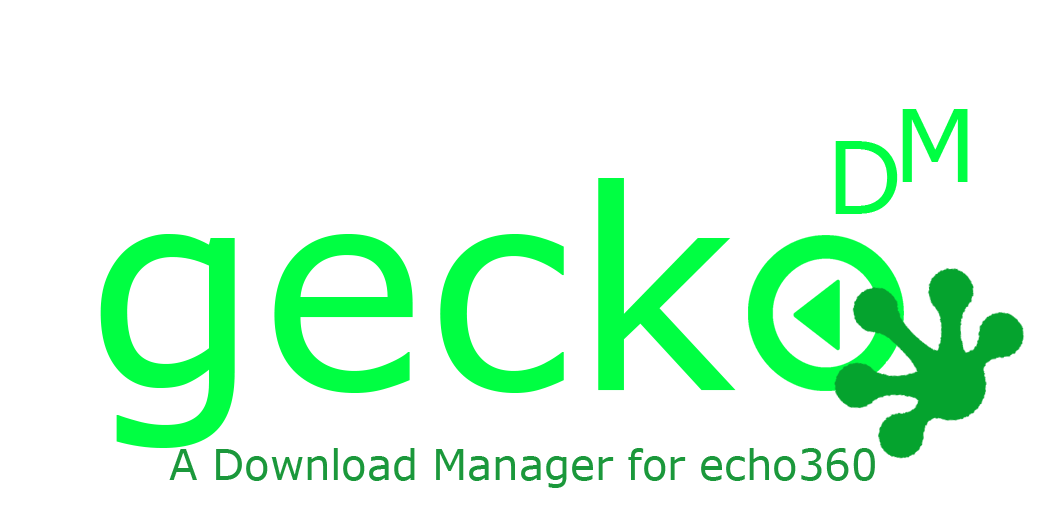
<style>
.page{position:relative;width:1040px;height:520px;background:#ffffff}
.page>*{position:absolute;margin:0}
.t1{font:100px "MSReferenceSansSerif";color:#00ff42}
.t2{font:279.2px "MSReferenceSansSerif";color:#00ff42}
.t3{font:41.7px "MSReferenceSansSerif";color:#1b983b}
</style>
<div class="page">
<p class="t1" style="left:902px;top:109px;width:66px;height:73px">M</p>
<p class="t1" style="left:835px;top:141px;width:63px;height:73px">D</p>
<p class="t2" style="left:100px;top:178px;width:636px;height:270px">geck</p>
<p class="t3" style="left:169px;top:448px;width:706px;height:40px">A Download Manager for echo360</p>
</div>
